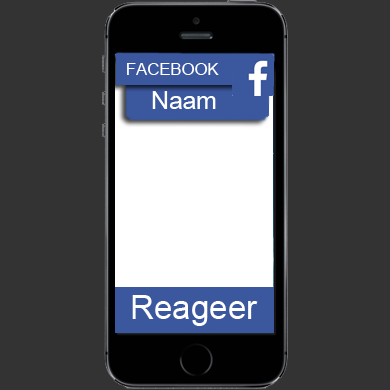
<style>
.page{position:relative;width:390px;height:390px;background:#333333}
.page>*{position:absolute;margin:0}
.t1{font:24.7px "ArialMT";color:#ffffff}
.t2{font:33.3px "ArialMT";color:#ffffff}
</style>
<div class="page">
<p class="t1" style="left:152px;top:91px;width:64px;height:18px">Naam</p>
<p class="t2" style="left:132px;top:295px;width:126px;height:31px">Reageer</p>
</div>
